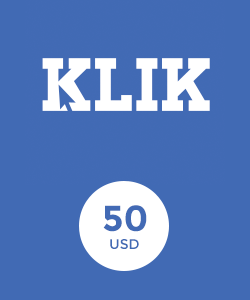
<style>
.page{position:relative;width:250px;height:300px;background:#416ab4}
.page>*{position:absolute;margin:0}
.t1{font:36px "Montserrat-Bold";color:#426ab5}
.t2{font:14px "Montserrat-Regular";color:#416ab4}
</style>
<div class="page">
<p class="t1" style="left:103px;top:205px;width:44px;height:27px">50</p>
<p class="t2" style="left:110px;top:239px;width:29px;height:10px">USD</p>
</div>
